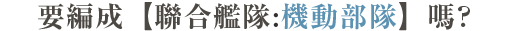
<style>
.page{position:relative;width:507px;height:31px;background:#ffffff}
.page>*{position:absolute;margin:0}
.t1{font:28px "RyuminPr6N-ExBold";letter-spacing:0.05em;color:#4c4843}
.t2{font:28px "RyuminPr6N-ExBold";letter-spacing:0.05em;color:#323232}
.t3{font:28px "RyuminPr6N-ExBold";letter-spacing:0.05em;color:#5b92b2}
</style>
<div class="page">
<p class="t1" style="left:38px;top:2px;width:432px;height:29px">要編成【聯合艦隊<span class="t2">:</span><span class="t3">機動部隊</span>】嗎?</p>
</div>
